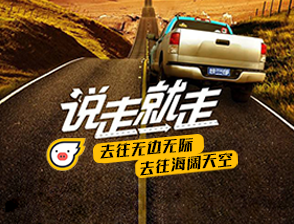
<style>
.page{position:relative;width:294px;height:224px}
.page>*{position:absolute;margin:0}
.t1{font:14.9px "FZSKJW--GB1-0";letter-spacing:0.06em;color:#000000;font-style:italic}
</style>
<div class="page">
<p class="t1" style="left:100px;top:137px;width:93px;height:22px;rotate:-5deg">去往无边无际</p>
<p class="t1" style="left:140px;top:152px;width:93px;height:24px;rotate:-6deg">去往海阔天空</p>
</div>
